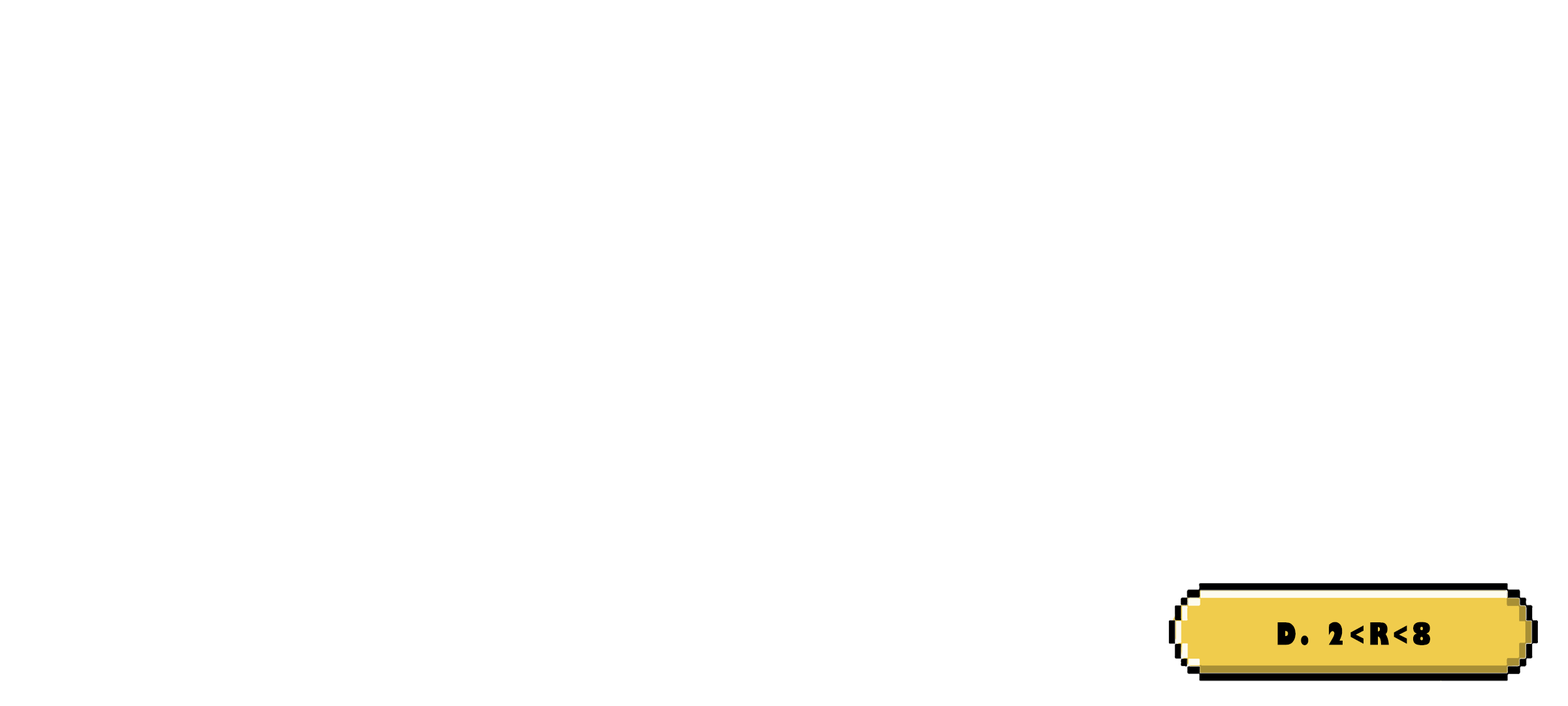
<style>
.page{position:relative;width:1568px;height:706px;background:#ffffff}
.page>*{position:absolute;margin:0}
.t1{font:29.9px "GillSans-UltraBoldCondensed";letter-spacing:0.115em;color:#000000;text-transform:uppercase;scale:1.12 1}
</style>
<div class="page">
<p class="t1" style="left:1277px;top:621px;width:153px;height:24px">d. 2&lt;r&lt;8</p>
</div>
